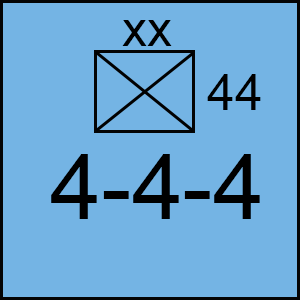
<style>
.page{position:relative;width:300px;height:300px;background:#74b4e4}
.page>*{position:absolute;margin:0}
.t1{font:50px "ArialMT";color:#000000}
.t2{font:91.7px "ArialMT";color:#000000}
</style>
<div class="page">
<p class="t1" style="left:122px;top:20px;width:50px;height:26px">xx</p>
<p class="t1" style="left:207px;top:74px;width:54px;height:36px">44</p>
<p class="t2" style="left:51px;top:154px;width:209px;height:65px">4-4-4</p>
</div>
